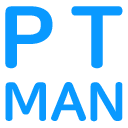
<style>
.page{position:relative;width:128px;height:128px;background:#ffffff}
.page>*{position:absolute;margin:0}
.t1{font:86.2px "NanumSquareRoundEB";letter-spacing:-0.04em;color:#0999ff;scale:1.05 1}
.t2{font:53.9px "NanumSquareRoundEB";letter-spacing:-0.04em;color:#0999ff;scale:1.05 1}
</style>
<div class="page">
<p class="t1" style="left:5px;top:6px;width:118px;height:63px">P T</p>
<p class="t2" style="left:5px;top:82px;width:118px;height:40px">MAN</p>
</div>
